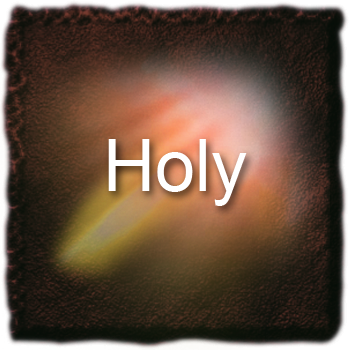
<style>
.page{position:relative;width:350px;height:350px}
.page>*{position:absolute;margin:0}
.t1{font:71.8px "ArialMT";color:#ffffff}
</style>
<div class="page">
<p class="t1" style="left:108px;top:139px;width:139px;height:67px">Holy</p>
</div>
